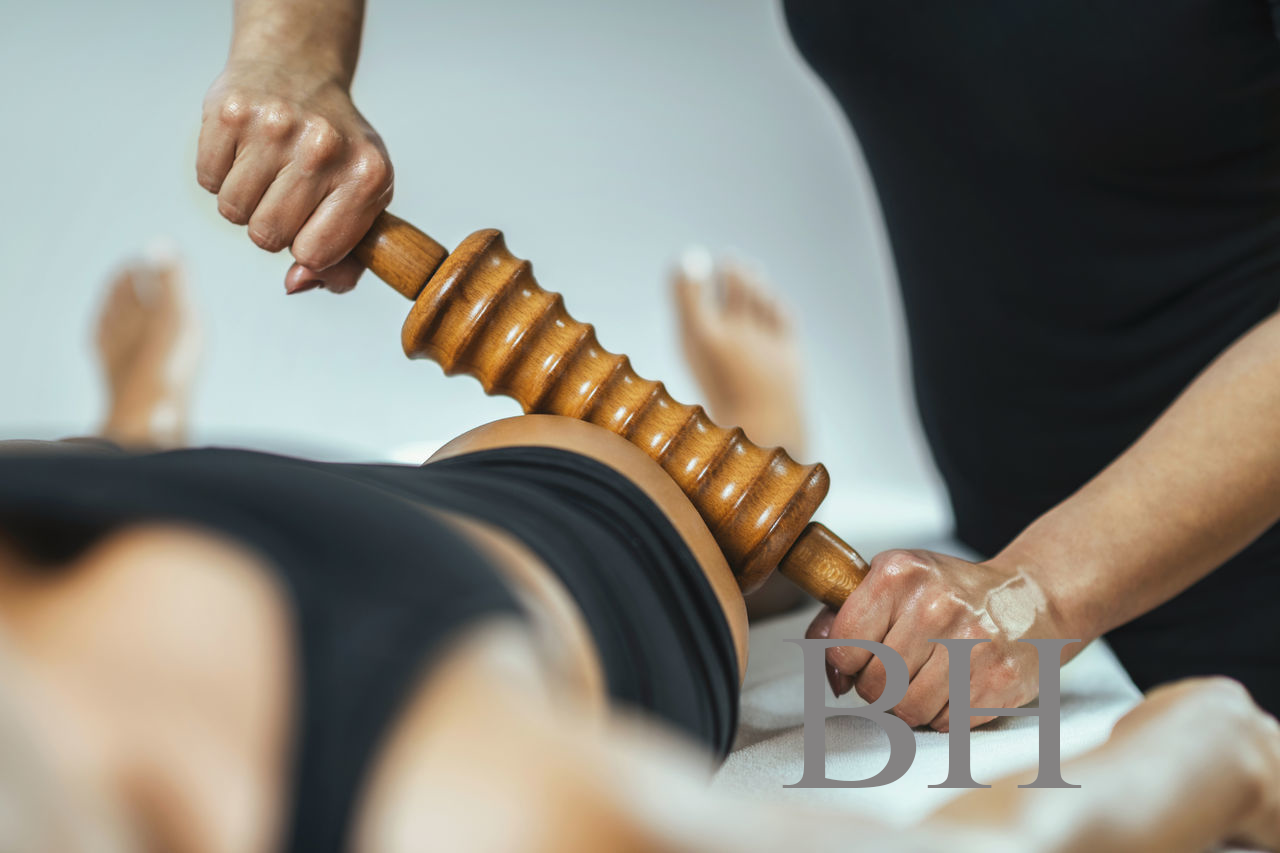
<style>
.page{position:relative;width:1280px;height:853px}
.page>*{position:absolute;margin:0}
.t1{font:225px "TimesNewRomanPSMT";letter-spacing:-0.02em;color:#848282}
</style>
<div class="page">
<p class="t1" style="left:782px;top:638px;width:300px;height:150px">BH</p>
</div>
